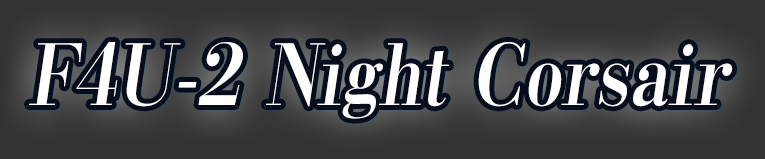
<style>
.page{position:relative;width:765px;height:159px;background:#333333}
.page>*{position:absolute;margin:0}
.t1{font:84px "KochoStd-Heavy";letter-spacing:0.01em;color:#ffffff;font-style:italic;scale:0.83 1}
</style>
<div class="page">
<p class="t1" style="left:29px;top:42px;width:704px;height:77px">F4U-2 Night Corsair</p>
</div>
